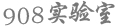
<style>
.page{position:relative;width:118px;height:28px;background:#ffffff}
.page>*{position:absolute;margin:0}
.t1{font:22px "FZXKJW--GB1-0";letter-spacing:0.05em;color:#777777}
.t2{font:26px "FZXKJW--GB1-0";letter-spacing:-0.1em;color:#777777}
</style>
<div class="page">
<p class="t1" style="left:3px;top:0px;width:112px;height:26px">908<span class="t2">实验室</span></p>
</div>
